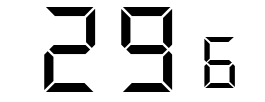
<style>
.page{position:relative;width:265px;height:102px;background:#ffffff}
.page>*{position:absolute;margin:0}
.t1{font:133.3px "DS-Digital";color:#000000}
.t2{font:80px "DS-Digital";color:#000000}
</style>
<div class="page">
<p class="t1" style="left:44px;top:7px;width:52px;height:85px">2</p>
<p class="t1" style="left:121px;top:7px;width:52px;height:85px">9</p>
<p class="t2" style="left:204px;top:37px;width:31px;height:51px">6</p>
</div>
